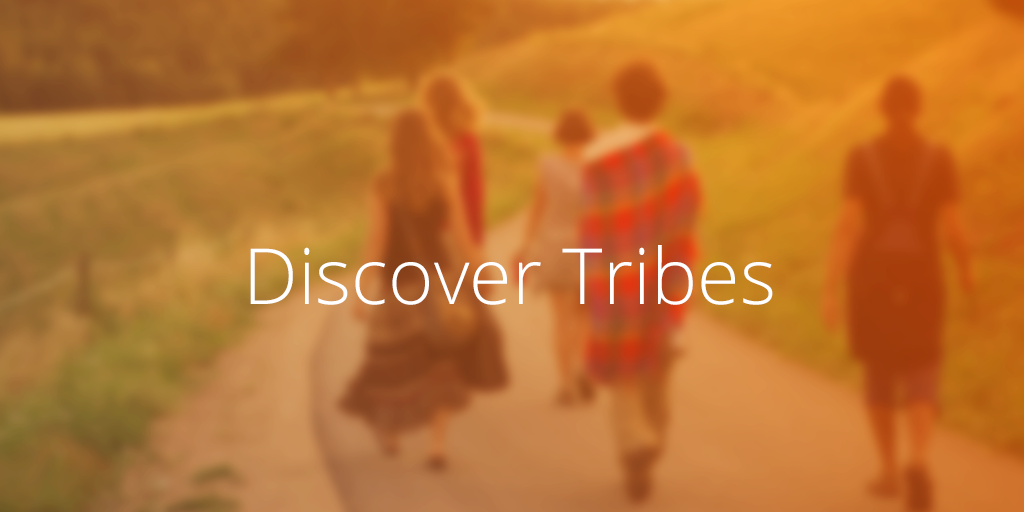
<style>
.page{position:relative;width:1024px;height:512px}
.page>*{position:absolute;margin:0}
.t1{font:77.6px "OpenSans-Light";color:#ffffff}
</style>
<div class="page">
<p class="t1" style="left:250px;top:245px;width:523px;height:60px">Discover Tribes</p>
</div>
